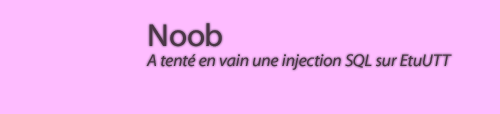
<style>
.page{position:relative;width:500px;height:114px;background:#febcff}
.page>*{position:absolute;margin:0}
.t1{font:17px "MyriadWebPro-Italic";color:#4a3646}
.t2{font:32px "MyriadWebPro";color:#4a3646}
</style>
<div class="page">
<p class="t1" style="left:146px;top:23px;width:306px;height:47px"><span class="t2">Noob<br></span>A tenté en vain une injection SQL sur EtuUTT</p>
</div>
